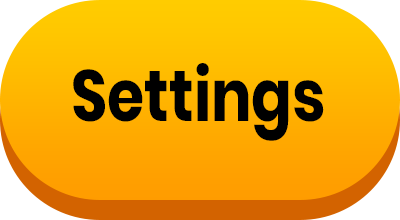
<style>
.page{position:relative;width:400px;height:220px}
.page>*{position:absolute;margin:0}
.t1{font:72px "Poppins-Bold";color:#000000;scale:0.83 1}
</style>
<div class="page">
<p class="t1" style="left:73px;top:63px;width:251px;height:78px">Settings</p>
</div>
